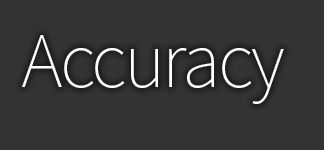
<style>
.page{position:relative;width:324px;height:150px;background:#333333}
.page>*{position:absolute;margin:0}
.t1{font:72px "NotoSansCJKkr-Thin";letter-spacing:-0.04em;color:#ffffff}
</style>
<div class="page">
<p class="t1" style="left:22px;top:35px;width:262px;height:69px">Accuracy</p>
</div>
